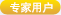
<style>
.page{position:relative;width:61px;height:15px}
.page>*{position:absolute;margin:0}
.t1{font:11px "SimHei";color:#ffffff}
</style>
<div class="page">
<p class="t1" style="left:10px;top:2px;width:43px;height:11px">专家用户</p>
</div>
